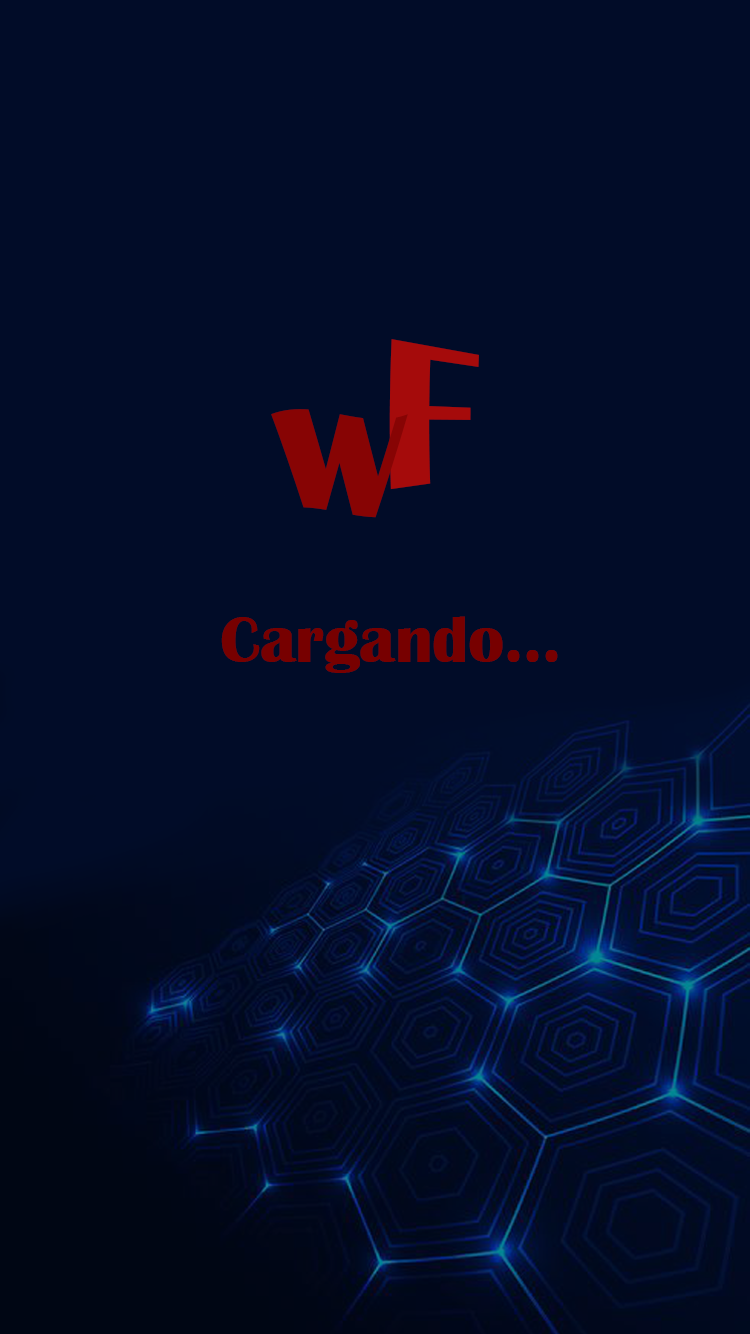
<style>
.page{position:relative;width:750px;height:1334px;background:#010c28}
.page>*{position:absolute;margin:0}
.t1{font:200px "BritannicBold";color:#a50b0b}
.t2{font:200px "BritannicBold";color:#870404}
.t3{font:66.7px "BritannicBold";color:#770000}
</style>
<div class="page">
<p class="t1" style="left:389px;top:339px;width:90px;height:151px">F</p>
<p class="t2" style="left:271px;top:409px;width:137px;height:109px">w</p>
<p class="t3" style="left:221px;top:616px;width:337px;height:57px">Cargando...</p>
</div>
